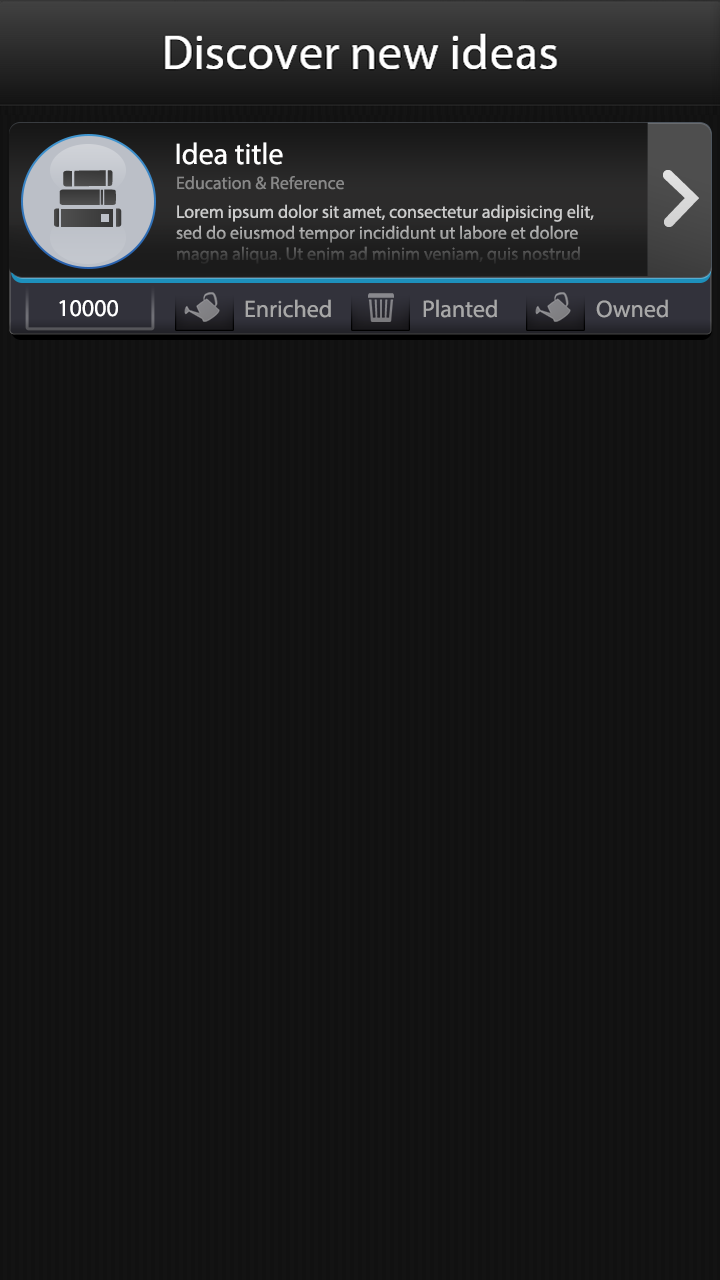
<style>
.page{position:relative;width:720px;height:1280px;background:#131313}
.page>*{position:absolute;margin:0}
.t1{font:30px "MyriadPro-Regular";color:#ffffff}
.t2{font:18px "MyriadPro-Regular";color:#888888}
.t3{font:18px/21px "MyriadPro-Regular"}
.t4{font:24px "MyriadPro-Regular";color:#ffffff}
.t5{font:24px "MyriadPro-Regular";color:#a7a7a7}
.t6{font:24px "MyriadPro-Regular";color:#a8a8a8}
</style>
<div class="page">
<p class="t1" style="left:176px;top:142px;width:107px;height:23px">Idea title</p>
<p class="t2" style="left:177px;top:176px;width:167px;height:14px">Education &amp; Reference</p>
<p class="t3" style="left:176px;top:204px;width:418px;height:60px">Lorem ipsum dolor sit amet, consectetur adipisicing elit, sed do eiusmod tempor incididunt ut labore et dolore magna aliqua. Ut enim ad minim veniam, quis nostrud exercitation ullamco laboris nisi ut aliquip ex ea commodo consequat.</p>
<p class="t4" style="left:59px;top:300px;width:59px;height:17px">10000</p>
<p class="t5" style="left:245px;top:299px;width:86px;height:19px">Enriched</p>
<p class="t6" style="left:423px;top:299px;width:74px;height:19px">Planted</p>
<p class="t6" style="left:596px;top:299px;width:72px;height:19px">Owned</p>
</div>
